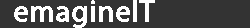
<style>
.page{position:relative;width:250px;height:28px;background:#333333}
.page>*{position:absolute;margin:0}
.t1{font:30px "MyriadPro-Regular";color:#ffffff;font-weight:bold}
</style>
<div class="page">
<p class="t1" style="left:14px;top:0px;width:141px;height:28px">emagineIT</p>
</div>
